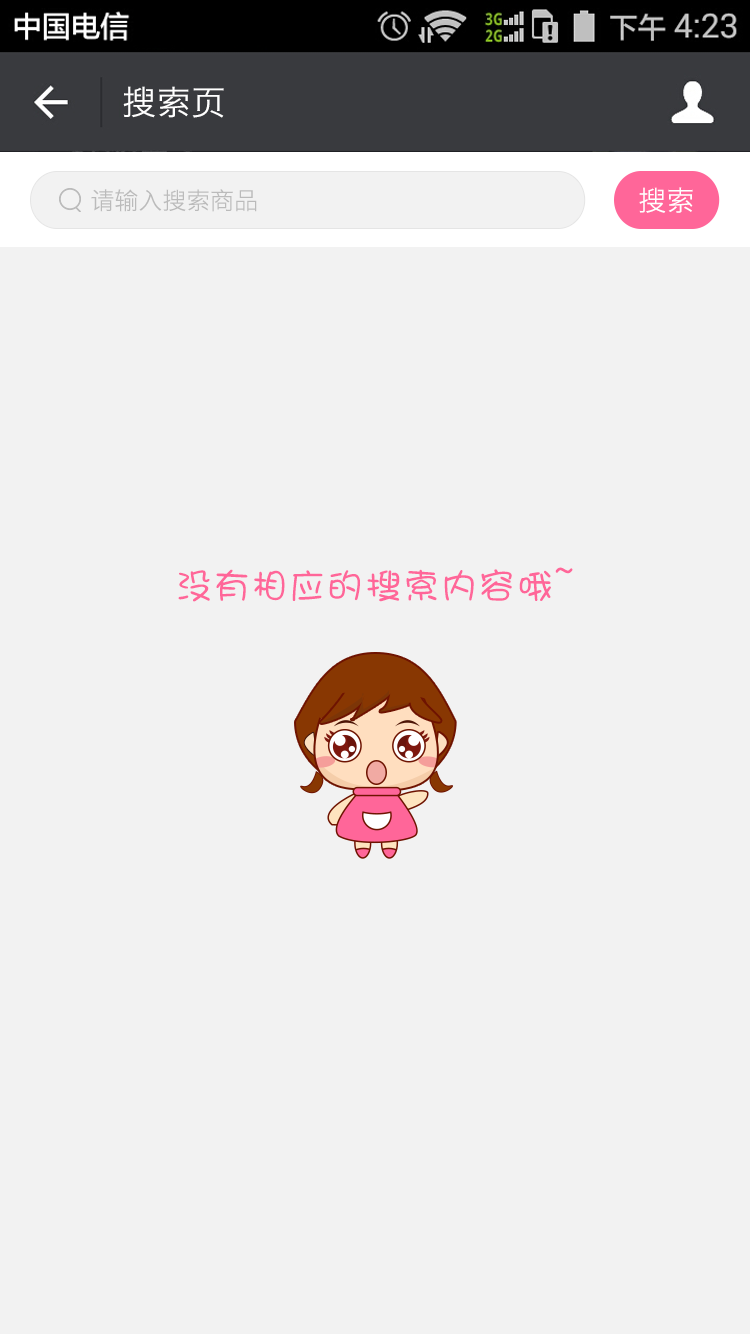
<style>
.page{position:relative;width:750px;height:1334px;background:#f2f2f2}
.page>*{position:absolute;margin:0}
.t1{font:34px "HiraginoSansGB-W3";letter-spacing:0.022em;color:#ffffff}
.t2{font:24px "HiraginoSansGB-W3";color:#bbbbbb}
.t3{font:28px "HiraginoSansGB-W3";letter-spacing:0.022em;color:#ffffff}
.t4{font:36px "DFShaoNvW5";letter-spacing:0.05em;color:#ff6699}
</style>
<div class="page">
<p class="t1" style="left:123px;top:86px;width:101px;height:32px">搜索页</p>
<p class="t2" style="left:91px;top:189px;width:166px;height:23px">请输入搜索商品</p>
<p class="t3" style="left:639px;top:187px;width:54px;height:26px">搜索</p>
<p class="t4" style="left:178px;top:567px;width:395px;height:35px">没有相应的搜索内容哦~</p>
</div>
